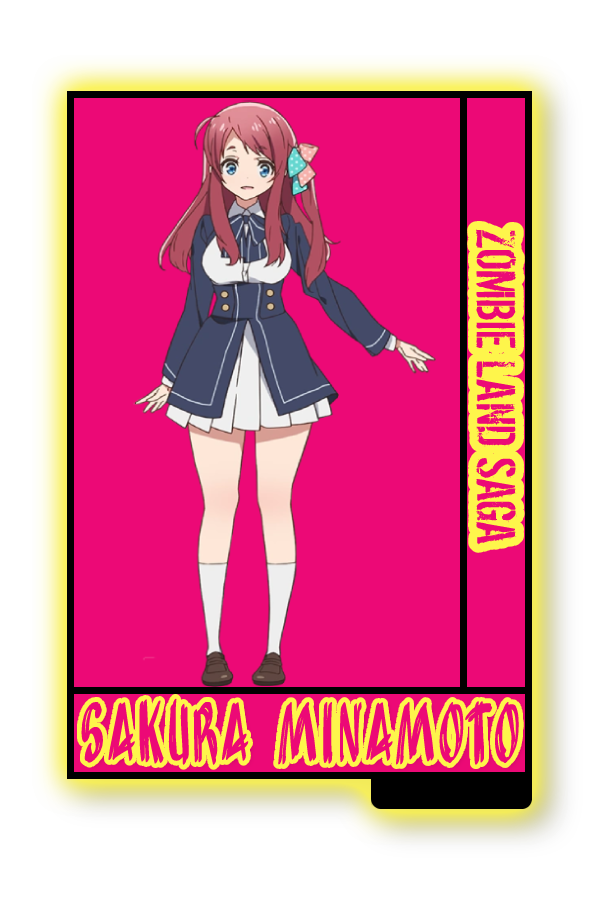
<style>
.page{position:relative;width:600px;height:900px;background:#ec0976}
.page>*{position:absolute;margin:0}
.t1{font:60.3px "DirtyEgo";color:#ec0976;scale:1.05 1}
.t2{font:72.2px "AnuDaw";color:#ec0976;scale:0.47 1}
</style>
<div class="page">
<p class="t1" style="left:476px;top:229px;width:41px;height:316px;rotate:90deg">ZOMBIE LAND SAGA</p>
<p class="t2" style="left:81px;top:698px;width:438px;height:67px">Sakura Minamoto</p>
</div>
